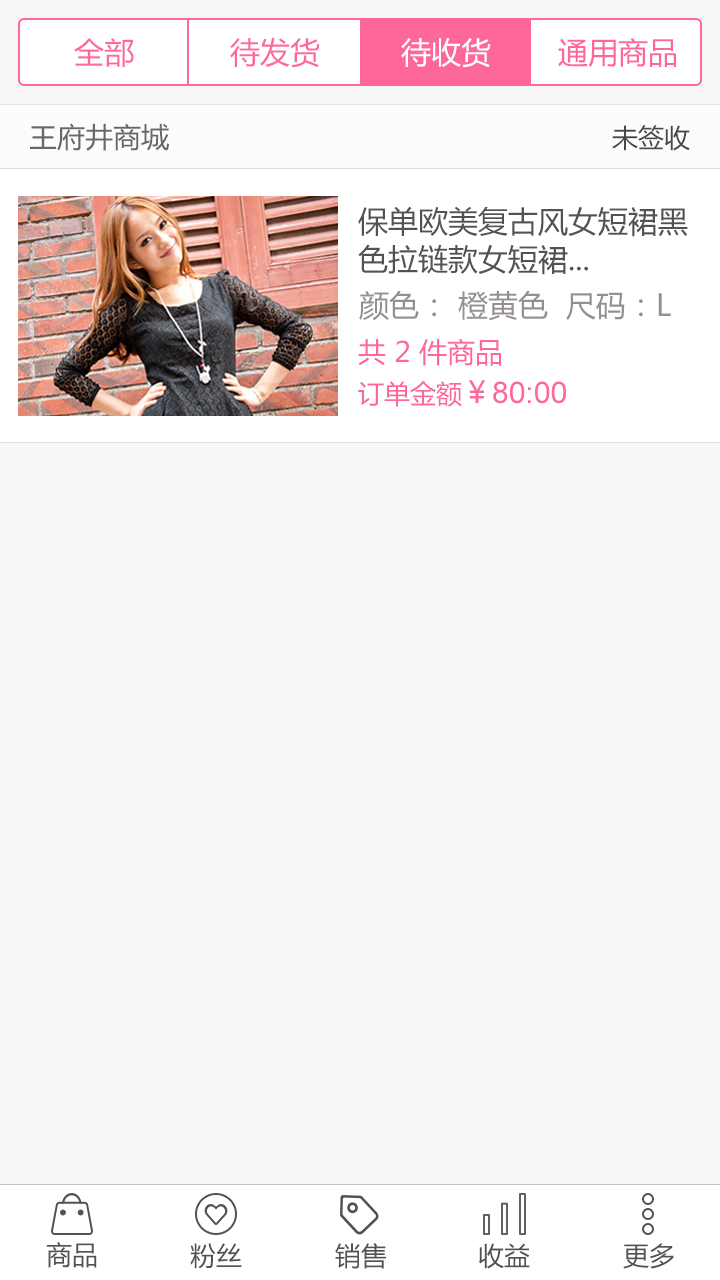
<style>
.page{position:relative;width:720px;height:1280px;background:#f7f7f7}
.page>*{position:absolute;margin:0}
.t1{font:30px "MicrosoftYaHei";color:#fd679a}
.t2{font:30px "MicrosoftYaHei";color:#ffffff}
.t3{font:28px "MicrosoftYaHei";color:#666666}
.t4{font:26px "MicrosoftYaHei";color:#4a4649}
.t5{font:30px/38px "MicrosoftYaHei";color:#525252}
.t6{font:30px "MicrosoftYaHei";color:#958f93}
.t7{font:28px "MicrosoftYaHei";color:#fd679a}
.t8{font:30px "ArialMT";color:#fd679a}
.t9{font:26px "MicrosoftYaHei";color:#fd679a}
.t10{font:26px "MicrosoftYaHei";color:#525252}
</style>
<div class="page">
<p class="t1" style="left:74px;top:38px;width:60px;height:29px">全部</p>
<p class="t1" style="left:230px;top:37px;width:90px;height:31px">待发货</p>
<p class="t2" style="left:401px;top:38px;width:90px;height:30px">待收货</p>
<p class="t1" style="left:558px;top:38px;width:118px;height:29px">通用商品</p>
<p class="t3" style="left:30px;top:123px;width:139px;height:28px">王府井商城</p>
<p class="t4" style="left:612px;top:125px;width:78px;height:26px">未签收</p>
<p class="t5" style="left:358px;top:206px;width:330px;height:69px">保单欧美复古风女短裙黑<br>色拉链款女短裙...</p>
<p class="t6" style="left:359px;top:290px;width:312px;height:31px">颜色： 橙黄色  尺码：L</p>
<p class="t7" style="left:358px;top:338px;width:143px;height:28px">共 2 件商品</p>
<p class="t8" style="left:358px;top:380px;width:208px;height:27px"><span class="t9">订单金额</span><span class="t1">￥</span>80:00</p>
<p class="t10" style="left:46px;top:1242px;width:51px;height:26px">商品</p>
<p class="t10" style="left:190px;top:1243px;width:52px;height:26px">粉丝</p>
<p class="t10" style="left:335px;top:1243px;width:51px;height:26px">销售</p>
<p class="t10" style="left:479px;top:1243px;width:51px;height:26px">收益</p>
<p class="t10" style="left:623px;top:1243px;width:51px;height:26px">更多</p>
</div>
